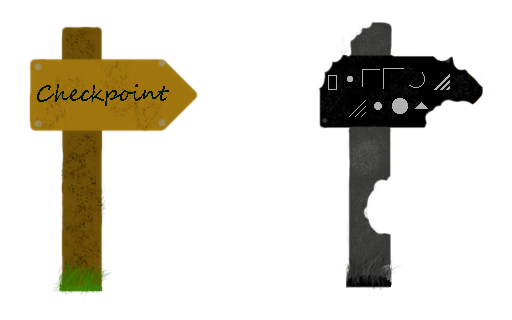
<style>
.page{position:relative;width:512px;height:320px;background:#ffffff}
.page>*{position:absolute;margin:0}
.t1{font:22.2px "SegoeScript";color:#001410}
</style>
<div class="page">
<p class="t1" style="left:37px;top:84px;width:132px;height:22px">Checkpoint</p>
</div>
